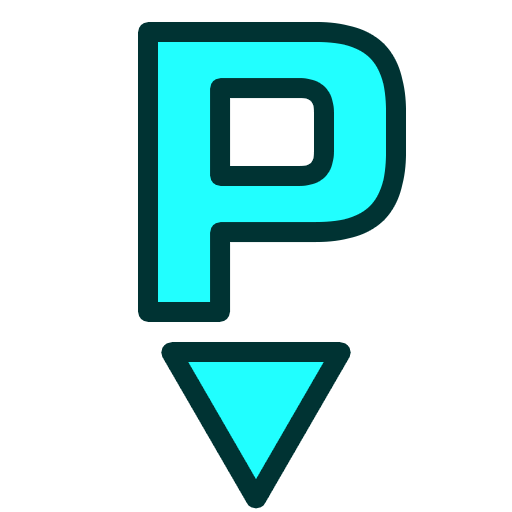
<style>
.page{position:relative;width:512px;height:512px;background:#ffffff}
.page>*{position:absolute;margin:0}
.t1{font:400px "RussoOne-Regular";color:#21ffff}
</style>
<div class="page">
<p class="t1" style="left:148px;top:32px;width:248px;height:280px">P</p>
</div>
